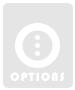
<style>
.page{position:relative;width:75px;height:90px;background:#e5e5e5}
.page>*{position:absolute;margin:0}
.t1{font:12px "Bauhaus93";letter-spacing:0.1em;color:#ffffff}
</style>
<div class="page">
<p class="t1" style="left:10px;top:72px;width:54px;height:9px">OPTIONS</p>
</div>
